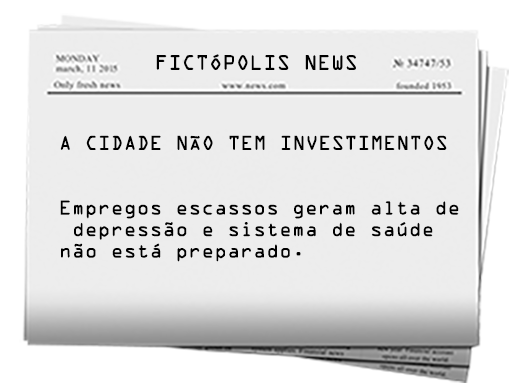
<style>
.page{position:relative;width:512px;height:387px;background:#ededed}
.page>*{position:absolute;margin:0}
.t1{font:18.8px "OCRAStd";color:#000000}
.t2{font:18px "OCRAStd";color:#000000}
</style>
<div class="page">
<p class="t1" style="left:156px;top:54px;width:200px;height:16px">FICTÓPOLIS NEWS</p>
<p class="t2" style="left:60px;top:135px;width:399px;height:127px">A CIDADE NÃO TEM INVESTIMENTOS<br><br><br>Empregos escassos geram alta de<br> depressão e sistema de saúde <br>não está preparado.</p>
</div>
